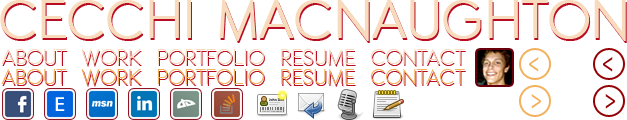
<style>
.page{position:relative;width:627px;height:120px;background:#ffffff}
.page>*{position:absolute;margin:0}
.t1{font:24px "ETH";color:#f2b15c;text-transform:uppercase}
</style>
<div class="page">
<p class="t1" style="left:1px;top:69px;width:464px;height:16px">About  work  Portfolio  Resume  Contact</p>
</div>
